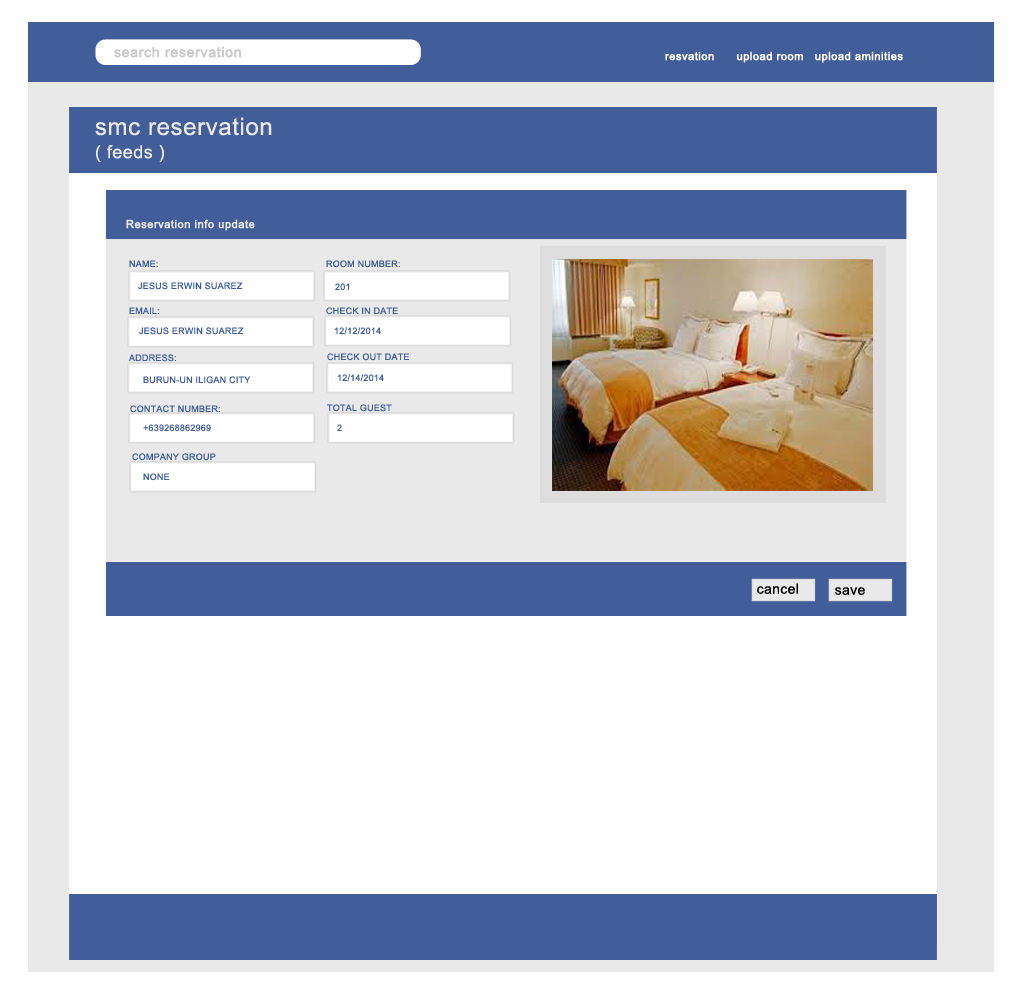
<style>
.page{position:relative;width:1024px;height:1000px;background:#ffffff}
.page>*{position:absolute;margin:0}
.t1{font:14px "ArialMT";letter-spacing:0.025em;color:#cacaca;font-weight:bold}
.t2{font:11px "ArialMT";letter-spacing:0.025em;color:#ffffff;font-weight:bold}
.t3{font:24px/11.6px "ArialMT";letter-spacing:0.025em;color:#e9e9e9}
.t4{font:18px/11.6px "ArialMT";letter-spacing:0.025em;color:#e9e9e9}
.t5{font:11px "ArialMT";letter-spacing:0.025em;color:#e9e9e9;font-weight:bold}
.t6{font:9px "ArialMT";letter-spacing:0.025em;color:#415e9b}
.t7{font:14px "ArialMT";letter-spacing:0.025em;color:#000000}
</style>
<div class="page">
<p class="t1" style="left:114px;top:46px;width:127px;height:12px">search reservation</p>
<p class="t2" style="left:665px;top:51px;width:238px;height:12px">resvation      upload room   upload aminities</p>
<p class="t3" style="left:95px;top:117px;width:177px;height:45px">smc reservation <br><br><span class="t4">( feeds )</span></p>
<p class="t5" style="left:126px;top:219px;width:129px;height:12px">Reservation info update</p>
<p class="t6" style="left:129px;top:260px;width:29px;height:7px">NAME:</p>
<p class="t6" style="left:326px;top:260px;width:74px;height:8px">ROOM NUMBER:</p>
<p class="t6" style="left:138px;top:282px;width:105px;height:8px">JESUS ERWIN SUAREZ</p>
<p class="t6" style="left:335px;top:283px;width:14px;height:8px">201</p>
<p class="t6" style="left:129px;top:307px;width:30px;height:7px">EMAIL:</p>
<p class="t6" style="left:326px;top:307px;width:72px;height:8px">CHECK IN DATE</p>
<p class="t6" style="left:139px;top:327px;width:105px;height:8px">JESUS ERWIN SUAREZ</p>
<p class="t6" style="left:334px;top:327px;width:47px;height:8px">12/12/2014</p>
<p class="t6" style="left:327px;top:353px;width:82px;height:8px">CHECK OUT DATE</p>
<p class="t6" style="left:128px;top:354px;width:48px;height:8px">ADDRESS:</p>
<p class="t6" style="left:143px;top:376px;width:108px;height:8px">BURUN-UN ILIGAN CITY</p>
<p class="t6" style="left:337px;top:374px;width:47px;height:8px">12/14/2014</p>
<p class="t6" style="left:130px;top:405px;width:90px;height:8px">CONTACT NUMBER:</p>
<p class="t6" style="left:327px;top:404px;width:65px;height:8px">TOTAL GUEST</p>
<p class="t6" style="left:143px;top:424px;width:68px;height:8px">+639268862969</p>
<p class="t6" style="left:337px;top:424px;width:5px;height:7px">2</p>
<p class="t6" style="left:132px;top:453px;width:84px;height:8px">COMPANY GROUP</p>
<p class="t6" style="left:143px;top:473px;width:27px;height:8px">NONE</p>
<p class="t7" style="left:757px;top:583px;width:41px;height:11px">cancel</p>
<p class="t7" style="left:835px;top:587px;width:30px;height:8px">save</p>
</div>
